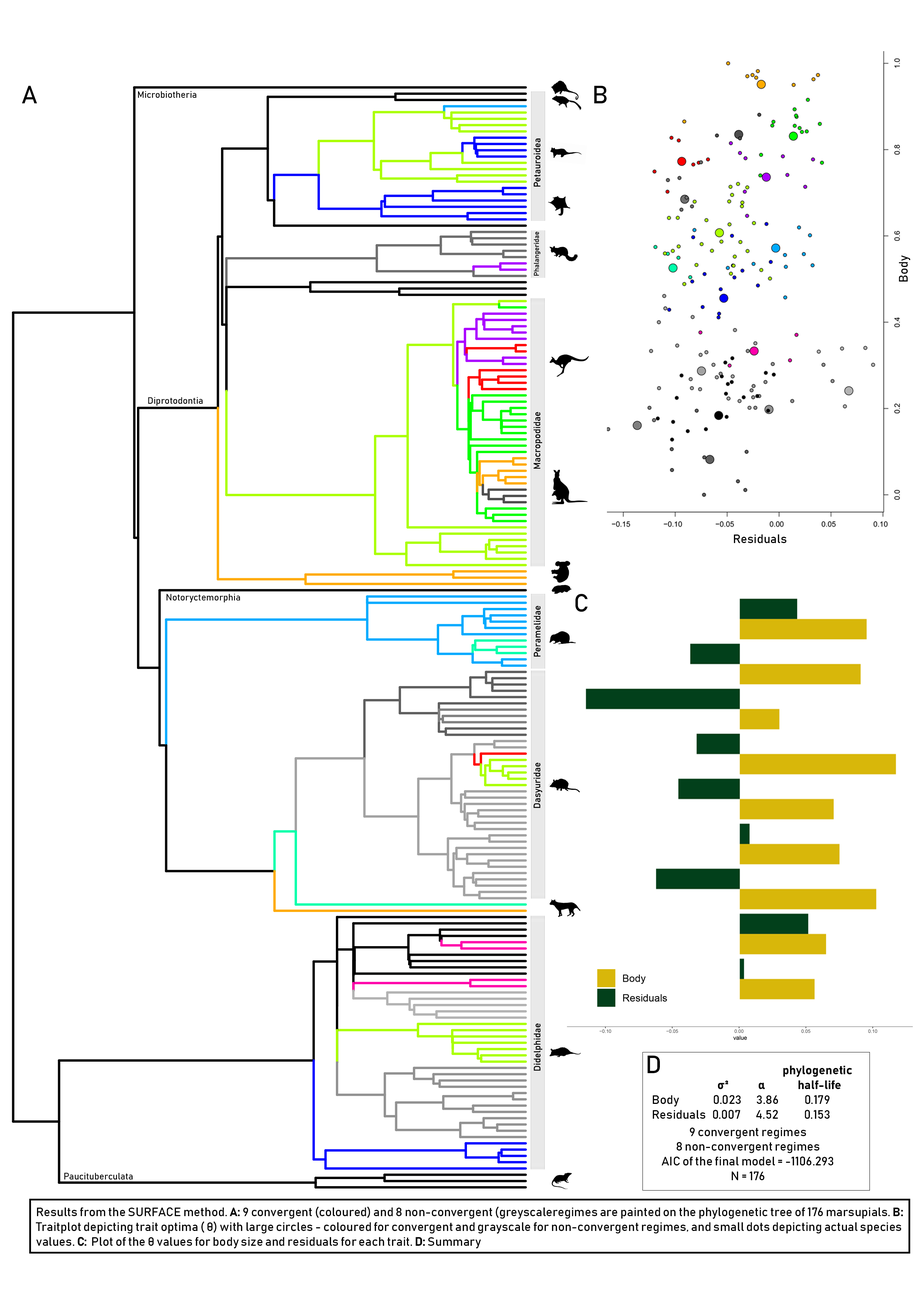
<style>
.page{position:relative;width:918px;height:1298px;background:#ffffff}
.page>*{position:absolute;margin:0}
.t1{font:24.7px "Bahnschrift";color:#000000}
.t2{font:12.4px "Bahnschrift";color:#000000}
.t3{font:12.4px "Bahnschrift-Bold";color:#000000}
</style>
<div class="page">
<p class="t1" style="left:22px;top:86px;width:15px;height:17px">A</p>
<p class="t1" style="left:594px;top:86px;width:13px;height:17px">B</p>
<p class="t2" style="left:899px;top:255px;width:12px;height:27px;rotate:-90deg">Body</p>
<p class="t2" style="left:734px;top:534px;width:53px;height:10px">Residuals</p>
<p class="t1" style="left:576px;top:594px;width:12px;height:18px">C</p>
<p class="t1" style="left:648px;top:1056px;width:12px;height:17px">D</p>
<p class="t3" style="left:784px;top:1066px;width:69px;height:23px;text-align:center">phylogenetic  <br>half-life</p>
<p class="t2" style="left:653px;top:1081px;width:177px;height:38px"><span class="t3">                               σ2              α      <br></span>Body                0.023       3.86            0.179    <br>Residuals   0.007       4.52            0.153</p>
<p class="t2" style="left:662px;top:1128px;width:172px;height:52px;text-align:center">9 convergent regimes<br>8 non-convergent regimes<br>AIC of the final model = -1106.293<br>N = 176</p>
<p class="t2" style="left:36px;top:1207px;width:867px;height:42px">Results from the SURFACE method. <span class="t3">A: </span>9 convergent (coloured) and 8 non-convergent (greyscaleregimes are painted on the phylogenetic tree of 176 marsupials. <span class="t3">B:</span> Traitplot depicting trait optima ( θ) with large circles - coloured for convergent and grayscale for non-convergent regimes, and small dots depicting actual species values. <span class="t3">C:</span>  Plot of the θ values for body size and residuals for each trait. <span class="t3">D:</span> Summary  <br>onvergent regime.</p>
</div>
